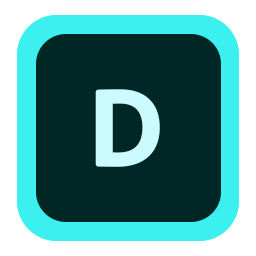
<style>
.page{position:relative;width:256px;height:256px;background:#002626}
.page>*{position:absolute;margin:0}
.t1{font:113px "AdobeClean-Bold";color:#ccfbff;font-weight:bold}
</style>
<div class="page">
<p class="t1" style="left:88px;top:86px;width:80px;height:95px">Q</p>
<p class="t1" style="left:95px;top:89px;width:65px;height:78px">D</p>
</div>
